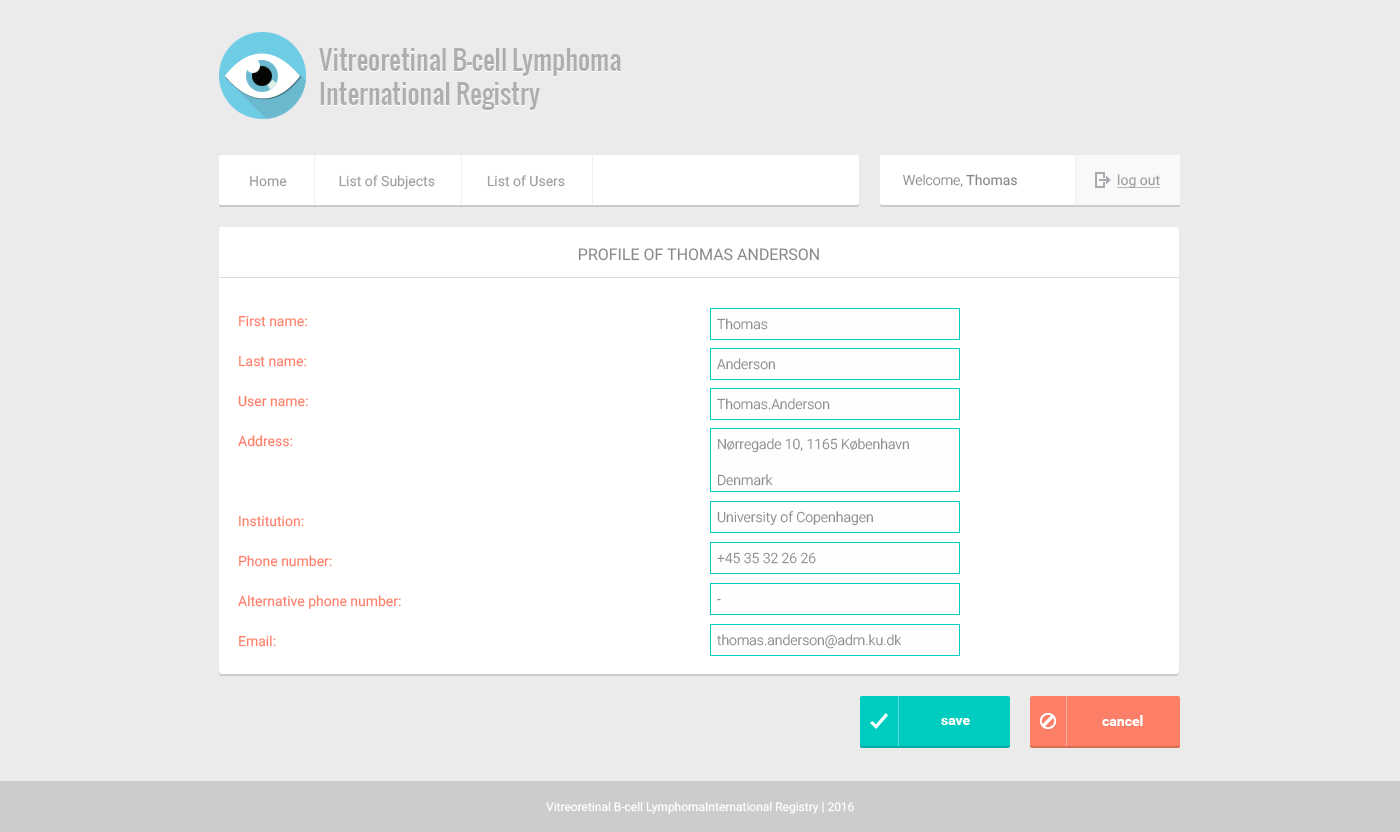
<style>
.page{position:relative;width:1400px;height:832px;background:#ebebeb}
.page>*{position:absolute;margin:0}
.t1{font:26px/34px "Oswald-Regular";color:#aeaeae}
.t2{font:14px "Roboto-Light";color:#888888}
.t3{font:14px "Roboto-Regular";color:#888888}
.t4{font:14px "Roboto-Regular";color:#a0a0a0;text-decoration:underline}
.t5{font:14px "Roboto-Regular";color:#a0a0a0}
.t6{font:16px "Roboto-Regular";color:#888888;text-transform:uppercase}
.t7{font:14px/40px "Roboto-Regular";color:#fd7f68}
.t8{font:14px/36px "Roboto-Light";color:#888888}
.t9{font:14px "Roboto-Bold";color:#ffffff}
.t10{font:12px "Roboto-Regular";color:#ffffff}
</style>
<div class="page">
<p class="t1" style="left:319px;top:49px;width:302px;height:62px">Vitreoretinal B-cell Lymphoma<br>International Registry</p>
<p class="t1" style="left:319px;top:48px;width:302px;height:62px">Vitreoretinal B-cell Lymphoma<br>International Registry</p>
<p class="t2" style="left:903px;top:174px;width:114px;height:13px">Welcome, <span class="t3">Thomas</span></p>
<p class="t4" style="left:1117px;top:174px;width:43px;height:15px">log out</p>
<p class="t5" style="left:250px;top:175px;width:315px;height:15px">Home               List of Subjects               List of Users</p>
<p class="t6" style="left:578px;top:248px;width:241px;height:13px">PROFILE OF THOMAS ANDERSON</p>
<p class="t7" style="left:238px;top:315px;width:163px;height:332px">First name:<br>Last name:<br>User name:<br>Address:<br><br>Institution:<br>Phone number:<br>Alternative phone number:<br>Email:</p>
<p class="t2" style="left:717px;top:318px;width:51px;height:12px">Thomas</p>
<p class="t2" style="left:717px;top:358px;width:58px;height:12px">Anderson</p>
<p class="t2" style="left:717px;top:398px;width:113px;height:12px">Thomas.Anderson</p>
<p class="t8" style="left:718px;top:438px;width:191px;height:48px">Nørregade 10, 1165 København<br>Denmark</p>
<p class="t2" style="left:717px;top:511px;width:156px;height:15px">University of Copenhagen</p>
<p class="t2" style="left:717px;top:552px;width:99px;height:12px">+45 35 32 26 26</p>
<p class="t2" style="left:717px;top:599px;width:4px;height:2px">-</p>
<p class="t2" style="left:717px;top:634px;width:184px;height:15px">thomas.anderson@adm.ku.dk</p>
<p class="t9" style="left:941px;top:718px;width:29px;height:7px">save</p>
<p class="t9" style="left:1102px;top:715px;width:41px;height:11px">cancel</p>
<p class="t10" style="left:546px;top:801px;width:308px;height:13px">Vitreoretinal B-cell LymphomaInternational Registry | 2016</p>
</div>
